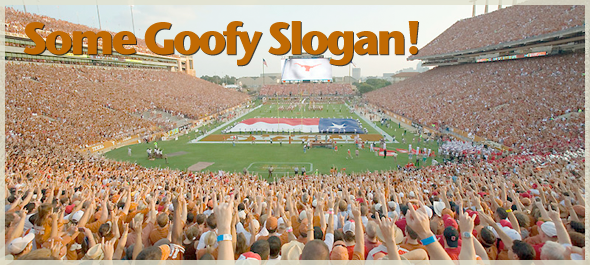
<style>
.page{position:relative;width:590px;height:265px}
.page>*{position:absolute;margin:0}
.t1{font:45px "StoneSansITC-Bold";letter-spacing:-0.08em;color:#c16a03}
</style>
<div class="page">
<p class="t1" style="left:23px;top:21px;width:396px;height:45px">Some Goofy Slogan!</p>
</div>
